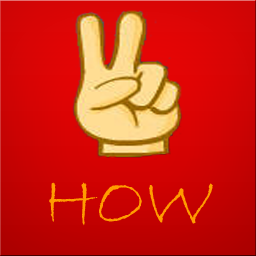
<style>
.page{position:relative;width:256px;height:256px}
.page>*{position:absolute;margin:0}
.t1{font:71.3px "BradleyHandITC";color:#ff9c00}
</style>
<div class="page">
<p class="t1" style="left:49px;top:182px;width:164px;height:44px">HOW</p>
</div>
